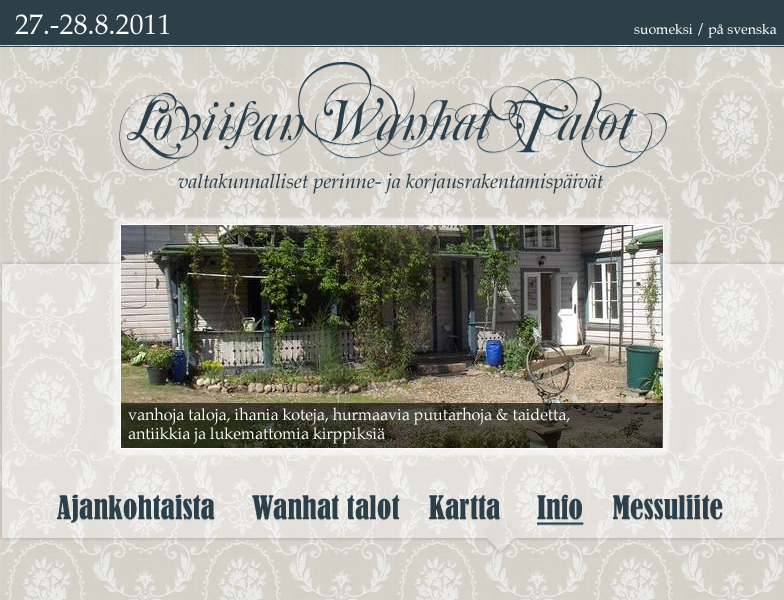
<style>
.page{position:relative;width:784px;height:600px}
.page>*{position:absolute;margin:0}
.t1{font:28px "Palatino-Roman";color:#ffffff}
.t2{font:14px "Palatino-Roman";color:#ffffff}
.t3{font:60px/14px "MutluOrnamental";color:#2d3f49}
.t4{font:20px "Palatino-Italic";color:#2d3f49}
.t5{font:16px "Palatino-Roman";color:#ffffff}
.t6{font:30px "BernardMT-Condensed";color:#2d3f49}
.t7{font:30px "BernardMT-Condensed";color:#2d3f49;text-decoration:underline}
</style>
<div class="page">
<p class="t1" style="left:15px;top:14px;width:154px;height:21px">27.-28.8.2011</p>
<p class="t2" style="left:634px;top:23px;width:143px;height:15px">suomeksi / på svenska</p>
<p class="t3" style="left:119px;top:62px;width:548px;height:108px">Loviisan Wanhat Talot</p>
<p class="t4" style="left:178px;top:173px;width:426px;height:21px">valtakunnalliset perinne- ja korjausrakentamispäivät</p>
<p class="t5" style="left:128px;top:407px;width:442px;height:37px">vanhoja taloja, ihania koteja, hurmaavia puutarhoja &amp; taidetta,<br>antiikkia ja lukemattomia kirppiksiä</p>
<p class="t6" style="left:57px;top:494px;width:666px;height:31px">Ajankohtaista     Wanhat talot    Kartta     <span class="t7">Info</span>    Messuliite</p>
</div>
